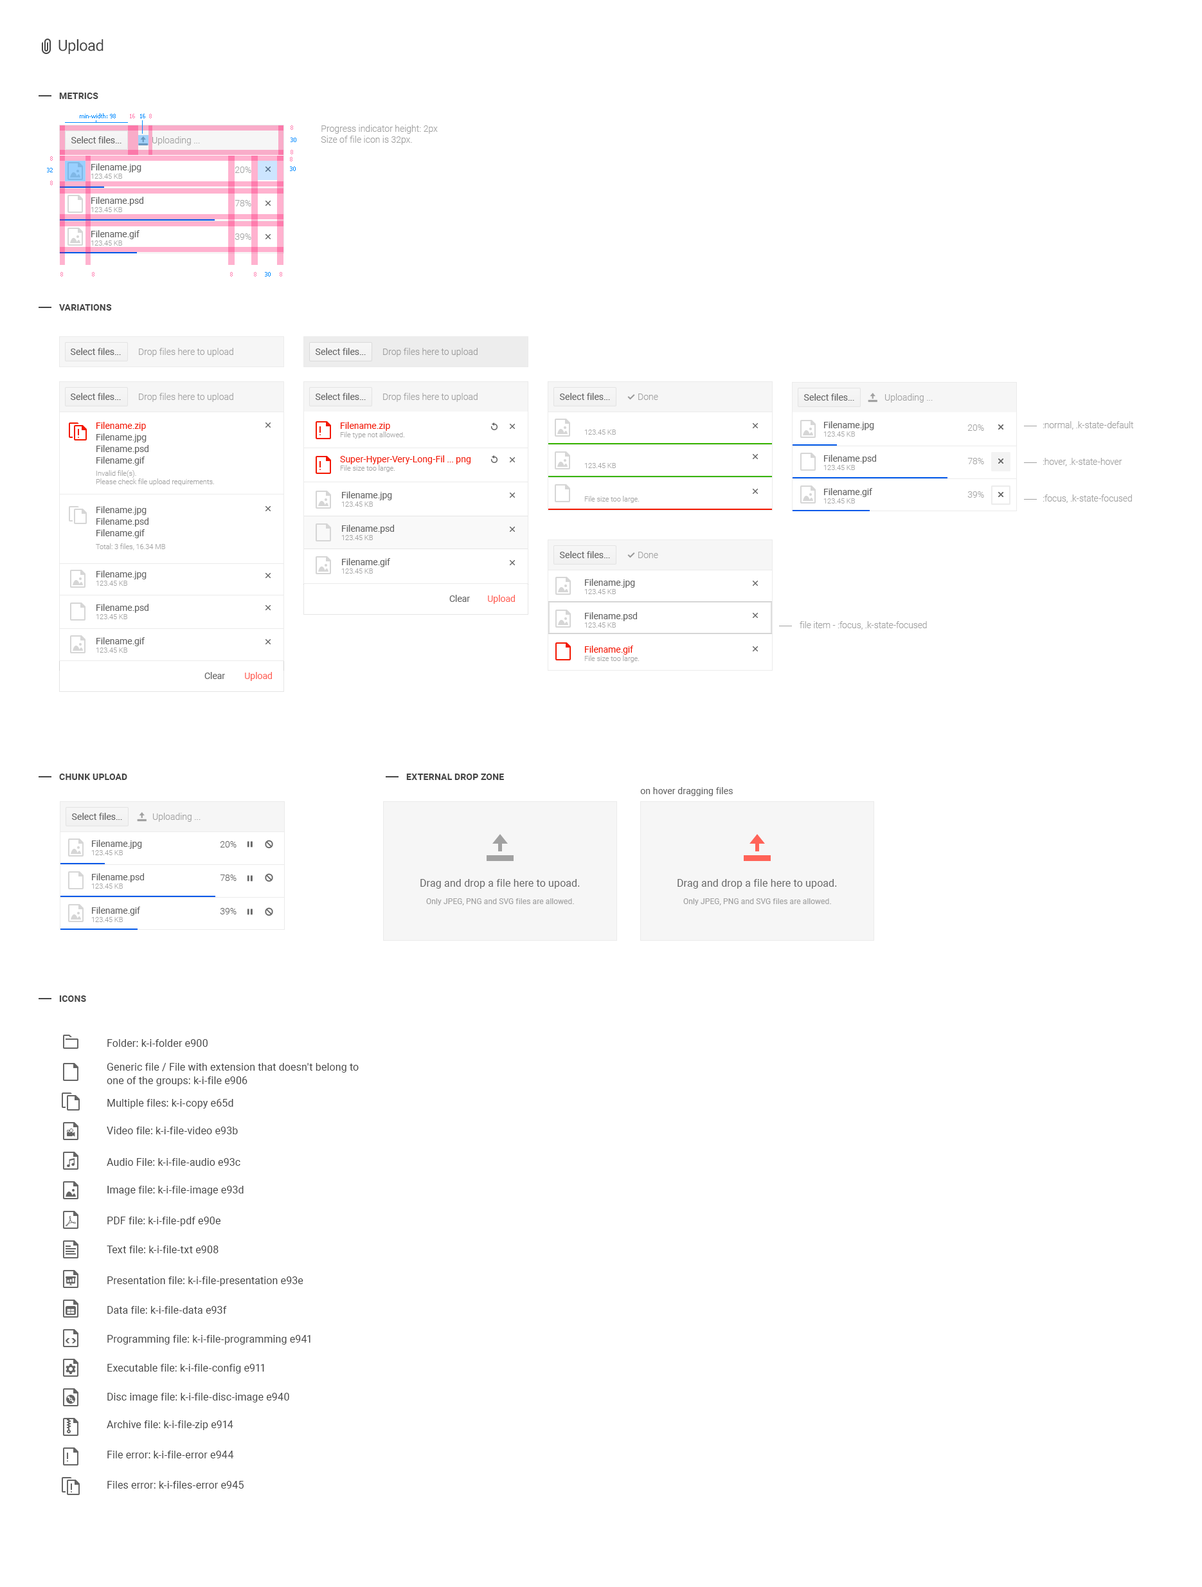
<style>
.page{position:relative;width:1202px;height:1587px;background:#ffffff}
.page>*{position:absolute;margin:0}
.t1{font:15.4px "Roboto-Regular";letter-spacing:-0.025em;color:#454545}
.t2{font:9px "Roboto-Bold";letter-spacing:0.01em;color:#454545;text-transform:uppercase}
.t3{font:5.8px "Tahoma";color:#008aff}
.t4{font:5.8px "Tahoma";color:#ff7cae}
.t5{font:9px "Roboto-Light";color:#a1a1a1}
.t6{font:9px "Roboto-Regular";color:#656565}
.t7{font:9px/33.4px "Roboto-Regular";color:#656565}
.t8{font:9px/33.4px "Roboto-Light";color:#a5a5a5}
.t9{font:9px "Roboto-Light";color:#9d9d9d}
.t10{font:9px/11.6px "Roboto-Regular";color:#656565}
.t11{font:9px/11.6px "Roboto-Regular";color:#f31700}
.t12{font:9px/33.4px "Roboto-Regular";color:#f31700}
.t13{font:9px/36.6px "Roboto-Light";color:#a1a1a1}
.t14{font:7.1px/33.4px "Roboto-Light";color:#a5a5a5}
.t15{font:7.1px "Roboto-Light";color:#a5a5a5}
.t16{font:9px "Roboto-Regular";color:#ff6358}
.t17{font:9px "Roboto-Regular";letter-spacing:0.01em;color:#656565}
.t18{font:9px/33.4px "Roboto-Light";color:#656565}
.t19{font:10.3px "Roboto-Regular";letter-spacing:0.01em;color:#656565}
.t20{font:7.7px "Roboto-Regular";letter-spacing:0.01em;color:#a1a1a1}
.t21{font:10.3px/28.9px "Roboto-Regular";letter-spacing:0.01em;color:#454545}
.t22{font:10.3px/27.6px "Roboto-Regular";letter-spacing:0.01em;color:#454545}
.t23{font:10.3px/23.8px "Roboto-Regular";letter-spacing:0.01em;color:#454545}
.t24{font:10.3px/13.5px "Roboto-Regular";letter-spacing:0.01em;color:#454545}
.t25{font:10.3px/22.5px "Roboto-Regular";letter-spacing:0.01em;color:#454545}
.t26{font:10.3px/31.5px "Roboto-Regular";letter-spacing:0.01em;color:#454545}
.t27{font:10.3px/30.9px "Roboto-Regular";letter-spacing:0.01em;color:#454545}
.t28{font:10.3px/29.6px "Roboto-Regular";letter-spacing:0.01em;color:#454545}
.t29{font:10.3px/30.2px "Roboto-Regular";letter-spacing:0.01em;color:#454545}
</style>
<div class="page">
<p class="t1" style="left:59px;top:39px;width:45px;height:15px">Upload</p>
<p class="t2" style="left:59px;top:93px;width:39px;height:6px">Metrics</p>
<p class="t3" style="left:80px;top:113px;width:36px;height:5px">min-width: 98</p>
<p class="t4" style="left:130px;top:114px;width:5px;height:4px">16</p>
<p class="t3" style="left:140px;top:114px;width:5px;height:4px">16</p>
<p class="t4" style="left:149px;top:114px;width:3px;height:4px">8</p>
<p class="t4" style="left:291px;top:125px;width:2px;height:5px">8</p>
<p class="t5" style="left:321px;top:125px;width:117px;height:20px">Progress indicator height: 2px<br>Size of file icon is 32px.</p>
<p class="t6" style="left:71px;top:136px;width:51px;height:7px">Select files...</p>
<p class="t5" style="left:152px;top:136px;width:48px;height:9px">Uploading ...</p>
<p class="t3" style="left:291px;top:138px;width:5px;height:4px">30</p>
<p class="t4" style="left:291px;top:150px;width:2px;height:4px">8</p>
<p class="t4" style="left:50px;top:156px;width:3px;height:5px">8</p>
<p class="t4" style="left:290px;top:157px;width:2px;height:4px">8</p>
<p class="t3" style="left:47px;top:168px;width:6px;height:4px">32</p>
<p class="t7" style="left:91px;top:163px;width:52px;height:76px">Filename.jpg<br>Filename.psd<br>Filename.gif</p>
<p class="t8" style="left:235px;top:166px;width:16px;height:74px;text-align:right">20%<br>78%<br>39%</p>
<p class="t3" style="left:290px;top:166px;width:6px;height:5px">30</p>
<p class="t4" style="left:50px;top:181px;width:3px;height:4px">8</p>
<p class="t4" style="left:60px;top:272px;width:3px;height:4px">8</p>
<p class="t4" style="left:92px;top:272px;width:2px;height:4px">8</p>
<p class="t4" style="left:230px;top:272px;width:3px;height:4px">8</p>
<p class="t4" style="left:254px;top:272px;width:2px;height:4px">8</p>
<p class="t3" style="left:265px;top:272px;width:6px;height:4px">30</p>
<p class="t4" style="left:280px;top:272px;width:2px;height:4px">8</p>
<p class="t2" style="left:59px;top:304px;width:53px;height:6px">variations</p>
<p class="t6" style="left:70px;top:348px;width:51px;height:7px">Select files...</p>
<p class="t5" style="left:139px;top:348px;width:94px;height:9px">Drop files here to upload</p>
<p class="t6" style="left:315px;top:348px;width:51px;height:7px">Select files...</p>
<p class="t9" style="left:383px;top:348px;width:95px;height:9px">Drop files here to upload</p>
<p class="t6" style="left:70px;top:393px;width:51px;height:7px">Select files...</p>
<p class="t5" style="left:139px;top:393px;width:94px;height:9px">Drop files here to upload</p>
<p class="t6" style="left:315px;top:393px;width:51px;height:7px">Select files...</p>
<p class="t5" style="left:383px;top:393px;width:95px;height:9px">Drop files here to upload</p>
<p class="t6" style="left:559px;top:393px;width:51px;height:7px">Select files...</p>
<p class="t5" style="left:638px;top:393px;width:20px;height:7px">Done</p>
<p class="t6" style="left:804px;top:393px;width:50px;height:8px">Select files...</p>
<p class="t5" style="left:885px;top:393px;width:48px;height:9px">Uploading ...</p>
<p class="t10" style="left:96px;top:422px;width:52px;height:43px"><span class="t11">Filename.zip<br></span>Filename.jpg<br>Filename.psd<br>Filename.gif</p>
<p class="t12" style="left:340px;top:422px;width:131px;height:42px">Filename.zip<br>Super-Hyper-Very-Long-Fil ... png</p>
<p class="t7" style="left:824px;top:421px;width:52px;height:76px">Filename.jpg<br>Filename.psd<br>Filename.gif</p>
<p class="t8" style="left:968px;top:424px;width:16px;height:74px;text-align:right">20%<br>78%<br>39%</p>
<p class="t13" style="left:1043px;top:421px;width:91px;height:82px">:normal, .k-state-default<br>:hover, .k-state-hover<br>:focus, .k-state-focused</p>
<p class="t14" style="left:340px;top:431px;width:65px;height:41px">File type not allowed.<br>File size too large.</p>
<p class="t14" style="left:584px;top:429px;width:56px;height:74px">123.45 KB<br>123.45 KB<br>File size too large.</p>
<p class="t14" style="left:824px;top:431px;width:31px;height:72px">123.45 KB<br>123.45 KB<br>123.45 KB</p>
<p class="t15" style="left:96px;top:470px;width:118px;height:15px">Invalid file(s).<br>Please check file upload requirements.</p>
<p class="t7" style="left:342px;top:491px;width:52px;height:76px">Filename.jpg<br>Filename.psd<br>Filename.gif</p>
<p class="t10" style="left:96px;top:506px;width:52px;height:32px">Filename.jpg<br>Filename.psd<br>Filename.gif</p>
<p class="t14" style="left:341px;top:501px;width:32px;height:72px">123.45 KB<br>123.45 KB<br>123.45 KB</p>
<p class="t15" style="left:96px;top:543px;width:69px;height:7px">Total: 3 files, 16.34 MB</p>
<p class="t6" style="left:559px;top:551px;width:51px;height:7px">Select files...</p>
<p class="t5" style="left:638px;top:552px;width:20px;height:6px">Done</p>
<p class="t14" style="left:96px;top:580px;width:31px;height:72px">123.45 KB<br>123.45 KB<br>123.45 KB</p>
<p class="t7" style="left:96px;top:570px;width:52px;height:76px">Filename.jpg<br>Filename.psd<br>Filename.gif</p>
<p class="t7" style="left:585px;top:579px;width:52px;height:75px">Filename.jpg<br>Filename.psd<br><span class="t12">Filename.gif</span></p>
<p class="t14" style="left:584px;top:589px;width:56px;height:73px">123.45 KB<br>123.45 KB<br>File size too large.</p>
<p class="t6" style="left:449px;top:595px;width:21px;height:7px">Clear</p>
<p class="t16" style="left:488px;top:595px;width:27px;height:9px">Upload</p>
<p class="t5" style="left:800px;top:621px;width:127px;height:8px">file item - :focus, .k-state-focused</p>
<p class="t6" style="left:204px;top:672px;width:21px;height:7px">Clear</p>
<p class="t16" style="left:245px;top:672px;width:27px;height:9px">Upload</p>
<p class="t2" style="left:59px;top:773px;width:68px;height:7px">chunk upload</p>
<p class="t2" style="left:406px;top:773px;width:98px;height:7px">external drop zone</p>
<p class="t17" style="left:640px;top:787px;width:93px;height:9px">on hover dragging files</p>
<p class="t6" style="left:71px;top:813px;width:51px;height:7px">Select files...</p>
<p class="t5" style="left:153px;top:813px;width:48px;height:9px">Uploading ...</p>
<p class="t7" style="left:92px;top:840px;width:52px;height:75px">Filename.jpg<br>Filename.psd<br>Filename.gif</p>
<p class="t18" style="left:220px;top:841px;width:17px;height:73px;text-align:right">20%<br>78%<br>39%</p>
<p class="t14" style="left:91px;top:850px;width:32px;height:72px">123.45 KB<br>123.45 KB<br>123.45 KB</p>
<p class="t19" style="left:420px;top:879px;width:160px;height:9px">Drag and drop a file here to upoad.</p>
<p class="t19" style="left:678px;top:879px;width:159px;height:9px">Drag and drop a file here to upoad.</p>
<p class="t20" style="left:426px;top:898px;width:148px;height:7px">Only JPEG, PNG and SVG files are allowed.</p>
<p class="t20" style="left:683px;top:898px;width:148px;height:7px">Only JPEG, PNG and SVG files are allowed.</p>
<p class="t2" style="left:59px;top:995px;width:27px;height:7px">icons</p>
<p class="t21" style="left:107px;top:1039px;width:252px;height:449px"><span class="t22">Folder: k-i-folder e900<br></span><span class="t23">Generic file / File with extension that doesn't belong to <br></span><span class="t24">one of the groups: k-i-file e906<br></span><span class="t25">Multiple files: k-i-copy e65d<br></span><span class="t22">Video file: k-i-file-video e93b<br></span><span class="t26">Audio File: k-i-file-audio e93c<br></span><span class="t22">Image file: k-i-file-image e93d<br></span><span class="t27">PDF file: k-i-file-pdf e90e<br></span>Text file: k-i-file-txt e908<br><span class="t27">Presentation file: k-i-file-presentation e93e<br></span><span class="t28">Data file: k-i-file-data e93f<br></span>Programming file: k-i-file-programming e941<br>Executable file: k-i-file-config e911<br><span class="t22">Disc imag</span>e file: k-i-file-disc-image e940<br><span class="t22">Archive file: k-i-file-zip e914<br></span><span class="t29">File error: k-i-file-error e944<br>Files error: k-i-files-error e945</span></p>
</div>
